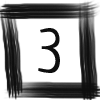
<style>
.page{position:relative;width:100px;height:100px;background:#ffffff}
.page>*{position:absolute;margin:0}
.t1{font:60px "Neucha";color:#0e0e0e}
</style>
<div class="page">
<p class="t1" style="left:38px;top:28px;width:22px;height:45px">3</p>
</div>
